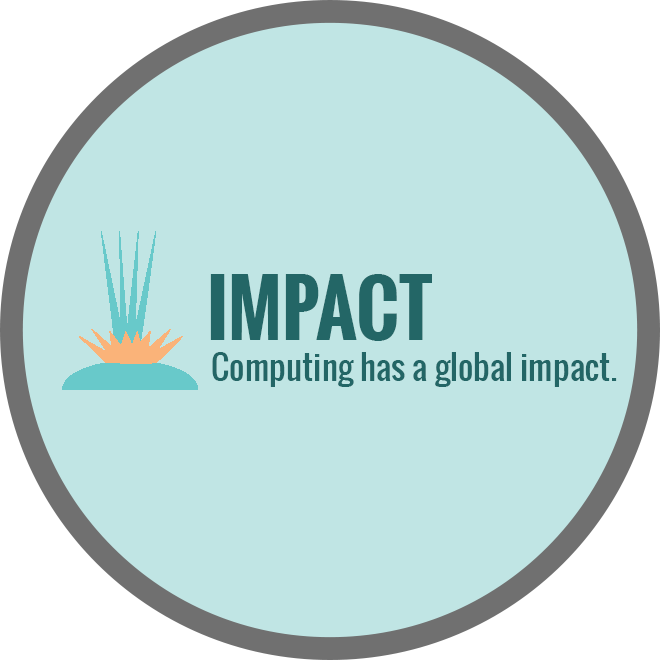
<style>
.page{position:relative;width:660px;height:660px;background:#c0e5e4}
.page>*{position:absolute;margin:0}
.t1{font:75px "Oswald-Bold";color:#236666}
.t2{font:33.3px "Oswald-Regular";color:#236666}
</style>
<div class="page">
<p class="t1" style="left:210px;top:274px;width:222px;height:67px">IMPACT</p>
<p class="t2" style="left:212px;top:352px;width:405px;height:35px">Computing has a global impact.</p>
</div>
